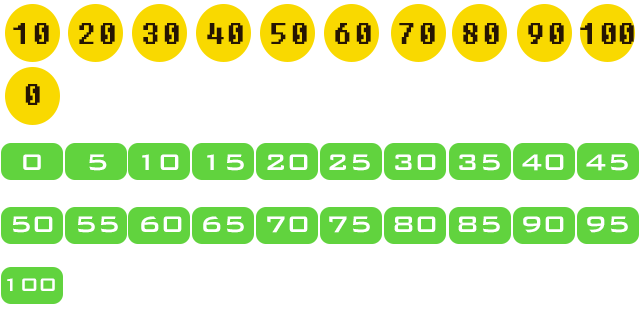
<style>
.page{position:relative;width:640px;height:320px;background:#ffffff}
.page>*{position:absolute;margin:0}
.t1{font:30px "BankGothicBT-Medium";color:#ffffff}
.t2{font:24px "BankGothicBT-Medium";color:#ffffff}
</style>
<div class="page">
<p class="t1" style="left:23px;top:154px;width:18px;height:16px">0</p>
<p class="t1" style="left:89px;top:154px;width:18px;height:17px">5</p>
<p class="t1" style="left:142px;top:154px;width:37px;height:16px">10</p>
<p class="t1" style="left:207px;top:154px;width:37px;height:17px">15</p>
<p class="t1" style="left:267px;top:154px;width:41px;height:16px">20</p>
<p class="t1" style="left:329px;top:154px;width:41px;height:17px">25</p>
<p class="t1" style="left:395px;top:154px;width:41px;height:16px">30</p>
<p class="t1" style="left:459px;top:154px;width:41px;height:17px">35</p>
<p class="t1" style="left:522px;top:154px;width:42px;height:17px">40</p>
<p class="t1" style="left:586px;top:154px;width:42px;height:17px">45</p>
<p class="t1" style="left:13px;top:216px;width:40px;height:17px">50</p>
<p class="t1" style="left:78px;top:216px;width:40px;height:17px">55</p>
<p class="t1" style="left:141px;top:216px;width:41px;height:16px">60</p>
<p class="t1" style="left:203px;top:216px;width:41px;height:17px">65</p>
<p class="t1" style="left:267px;top:216px;width:41px;height:17px">70</p>
<p class="t1" style="left:329px;top:216px;width:41px;height:17px">75</p>
<p class="t1" style="left:394px;top:216px;width:42px;height:16px">80</p>
<p class="t1" style="left:458px;top:216px;width:42px;height:17px">85</p>
<p class="t1" style="left:523px;top:216px;width:41px;height:17px">90</p>
<p class="t1" style="left:587px;top:216px;width:41px;height:17px">95</p>
<p class="t2" style="left:7px;top:278px;width:48px;height:13px">100</p>
</div>
